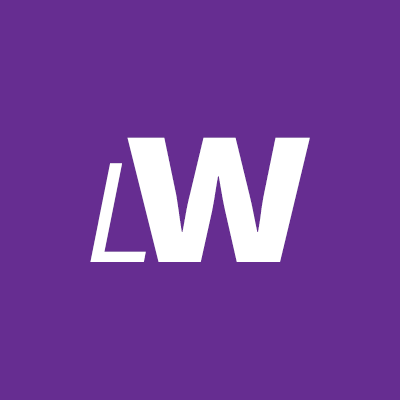
<style>
.page{position:relative;width:400px;height:400px;background:#662d91}
.page>*{position:absolute;margin:0}
.t1{font:150px "SourceSansPro-It";letter-spacing:-0.22em;color:#ffffff}
.t2{font:250px "SourceSansPro-Bold";letter-spacing:-0.22em;color:#ffffff}
</style>
<div class="page">
<p class="t1" style="left:90px;top:137px;width:220px;height:125px">L<span class="t2">w</span></p>
</div>
